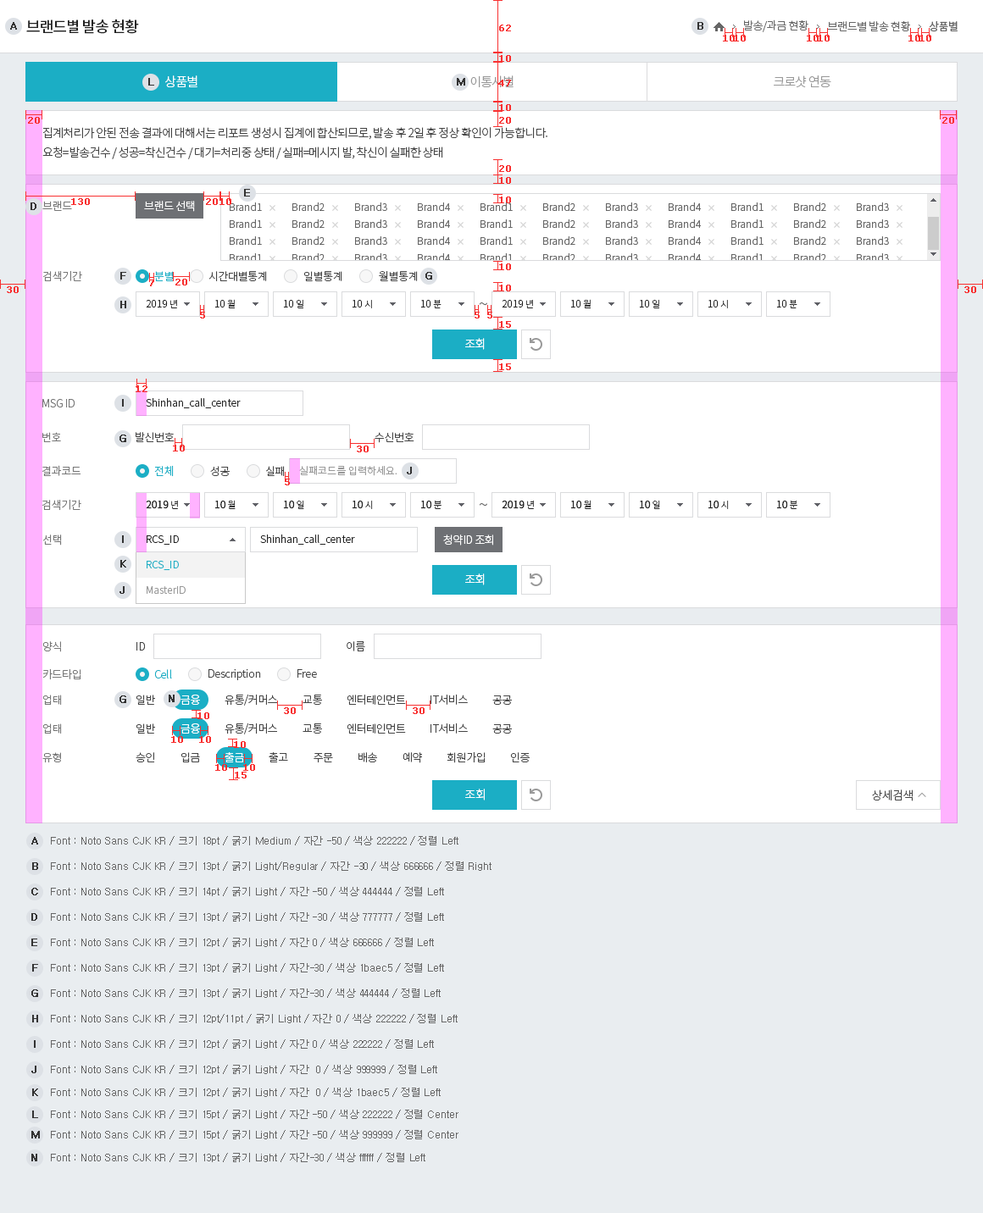
<style>
.page{position:relative;width:983px;height:1213px;background:#ffffff}
.page>*{position:absolute;margin:0}
.t1{font:15.3px "NotoSansCJKkr-Medium";letter-spacing:-0.05em;color:#222222}
.t2{font:9.3px "Verdana";color:#f83030;font-weight:bold}
.t3{font:11px "NotoSansCJKkr-Light";letter-spacing:-0.03em;color:#666666}
.t4{font:11px "NotoSansCJKkr-Regular";letter-spacing:-0.03em;color:#666666}
.t5{font:12.7px "NotoSansCJKkr-Light";letter-spacing:-0.05em;color:#ffffff}
.t6{font:12.7px "NotoSansCJKkr-Light";letter-spacing:-0.05em;color:#999999}
.t7{font:11.9px/19.5px "NotoSansCJKkr-Light";letter-spacing:-0.05em;color:#444444}
.t8{font:11px "NotoSansCJKkr-Light";letter-spacing:-0.03em;color:#777777}
.t9{font:11px "NotoSansCJKkr-Light";letter-spacing:-0.03em;color:#ffffff}
.t10{font:10.2px "NotoSansCJKkr-Light";color:#666666}
.t11{font:11px "NotoSansCJKkr-Light";letter-spacing:-0.03em;color:#1baec5}
.t12{font:11px "NotoSansCJKkr-Light";letter-spacing:-0.03em;color:#444444}
.t13{font:10.2px "NotoSansCJKkr-Light";color:#222222}
.t14{font:9.3px "NotoSansCJKkr-Light";letter-spacing:-0.05em;color:#222222}
.t15{font:16.9px "NotoSansCJKkr-Light";letter-spacing:-0.03em;color:#666666}
.t16{font:11.9px "NotoSansCJKkr-Light";letter-spacing:-0.05em;color:#ffffff}
.t17{font:10.2px "NotoSansCJKkr-Light";color:#999999}
.t18{font:10.2px "NotoSansCJKkr-Light";color:#222222;font-weight:bold}
.t19{font:10.2px/25.4px "NotoSansCJKkr-Light";color:#999999}
.t20{font:10.2px/25.4px "NotoSansCJKkr-Light";color:#1baec5}
.t21{font:11.9px "NotoSansCJKkr-Light";letter-spacing:-0.03em;color:#ffffff}
.t22{font:11.9px "NotoSansCJKkr-Light";letter-spacing:-0.03em;color:#444444}
.t23{font:10.2px "Dotum";color:#323232;font-weight:bold}
.t24{font:10.2px "Dotum";color:#666666}
.t25{font:10.2px "Dotum";color:#323232;text-transform:uppercase;font-weight:bold}
</style>
<div class="page">
<p class="t1" style="left:26px;top:19px;width:113px;height:15px">브랜드별 발송 현황</p>
<p class="t2" style="left:499px;top:25px;width:12px;height:6px">62</p>
<p class="t3" style="left:744px;top:19px;width:64px;height:13px">발송/과금 현황</p>
<p class="t3" style="left:827px;top:20px;width:83px;height:11px">브랜드별 발송 현황</p>
<p class="t4" style="left:929px;top:21px;width:28px;height:11px">상품별</p>
<p class="t2" style="left:499px;top:55px;width:12px;height:7px">10</p>
<p class="t5" style="left:165px;top:75px;width:32px;height:12px">상품별</p>
<p class="t6" style="left:470px;top:75px;width:43px;height:12px">이통사별</p>
<p class="t6" style="left:774px;top:75px;width:57px;height:12px">크로샷 연동</p>
<p class="t2" style="left:498px;top:80px;width:13px;height:6px">47</p>
<p class="t2" style="left:499px;top:104px;width:12px;height:7px">10</p>
<p class="t2" style="left:28px;top:117px;width:12px;height:7px">20</p>
<p class="t2" style="left:499px;top:117px;width:12px;height:7px">20</p>
<p class="t2" style="left:942px;top:117px;width:12px;height:7px">20</p>
<p class="t7" style="left:42px;top:127px;width:505px;height:32px">집계처리가 안된 전송 결과에 대해서는 리포트 생성시 집계에 합산되므로, 발송 후 2일 후 정상 확인이 가능합니다.<br>요청=발송건수 / 성공=착신건수 / 대기=처리중 상태 / 실패=메시지 발, 착신이 실패한 상태</p>
<p class="t2" style="left:499px;top:165px;width:12px;height:7px">20</p>
<p class="t2" style="left:499px;top:177px;width:12px;height:7px">10</p>
<p class="t8" style="left:42px;top:201px;width:30px;height:10px">브랜드</p>
<p class="t2" style="left:71px;top:198px;width:19px;height:7px">130</p>
<p class="t9" style="left:144px;top:201px;width:51px;height:11px">브랜드 선택</p>
<p class="t2" style="left:206px;top:198px;width:12px;height:7px">20</p>
<p class="t2" style="left:219px;top:198px;width:12px;height:7px">10</p>
<p class="t10" style="left:230px;top:202px;width:32px;height:9px">Brand1</p>
<p class="t10" style="left:292px;top:202px;width:33px;height:9px">Brand2</p>
<p class="t10" style="left:355px;top:202px;width:32px;height:9px">Brand3</p>
<p class="t10" style="left:418px;top:202px;width:32px;height:9px">Brand4</p>
<p class="t8" style="left:43px;top:270px;width:39px;height:12px">검색기간</p>
<p class="t2" style="left:149px;top:280px;width:5px;height:6px">7</p>
<p class="t11" style="left:154px;top:271px;width:20px;height:10px">분별</p>
<p class="t2" style="left:175px;top:279px;width:12px;height:7px">20</p>
<p class="t12" style="left:208px;top:271px;width:59px;height:10px">시간대별통계</p>
<p class="t12" style="left:303px;top:271px;width:39px;height:10px">일별통계</p>
<p class="t12" style="left:379px;top:271px;width:39px;height:10px">월별통계</p>
<p class="t2" style="left:7px;top:286px;width:12px;height:7px">30</p>
<p class="t2" style="left:964px;top:286px;width:12px;height:7px">30</p>
<p class="t13" style="left:146px;top:299px;width:31px;height:9px">2019 <span class="t14">년</span></p>
<p class="t13" style="left:214px;top:299px;width:21px;height:9px">10 <span class="t14">월</span></p>
<p class="t13" style="left:283px;top:299px;width:20px;height:9px">10 <span class="t14">일</span></p>
<p class="t13" style="left:352px;top:300px;width:20px;height:8px">10 <span class="t14">시</span></p>
<p class="t13" style="left:420px;top:299px;width:21px;height:9px">10 <span class="t14">분</span></p>
<p class="t15" style="left:479px;top:302px;width:8px;height:4px">~</p>
<p class="t2" style="left:200px;top:312px;width:5px;height:7px">5</p>
<p class="t2" style="left:474px;top:312px;width:6px;height:7px">5</p>
<p class="t2" style="left:487px;top:312px;width:5px;height:7px">5</p>
<p class="t2" style="left:499px;top:321px;width:12px;height:7px">15</p>
<p class="t16" style="left:465px;top:338px;width:20px;height:12px">조회</p>
<p class="t2" style="left:499px;top:363px;width:12px;height:7px">15</p>
<p class="t2" style="left:136px;top:386px;width:11px;height:6px">12</p>
<p class="t8" style="left:42px;top:399px;width:33px;height:9px">MSG ID</p>
<p class="t13" style="left:146px;top:398px;width:95px;height:10px">Shinhan_call_center</p>
<p class="t8" style="left:42px;top:432px;width:19px;height:10px">번호</p>
<p class="t12" style="left:136px;top:432px;width:39px;height:10px">발신번호</p>
<p class="t12" style="left:374px;top:432px;width:40px;height:11px">수신번호</p>
<p class="t2" style="left:173px;top:445px;width:12px;height:7px">10</p>
<p class="t2" style="left:357px;top:446px;width:12px;height:6px">30</p>
<p class="t8" style="left:42px;top:465px;width:39px;height:11px">결과코드</p>
<p class="t11" style="left:154px;top:465px;width:20px;height:12px">전체</p>
<p class="t12" style="left:210px;top:466px;width:20px;height:10px">성공</p>
<p class="t12" style="left:266px;top:466px;width:19px;height:10px">실패</p>
<p class="t17" style="left:299px;top:465px;width:98px;height:11px">실패코드를 입력하세요.</p>
<p class="t2" style="left:285px;top:479px;width:5px;height:6px">5</p>
<p class="t8" style="left:42px;top:499px;width:39px;height:12px">검색기간</p>
<p class="t18" style="left:146px;top:500px;width:32px;height:9px">2019 <span class="t14">년</span></p>
<p class="t18" style="left:214px;top:500px;width:22px;height:9px">10 <span class="t14">월</span></p>
<p class="t18" style="left:283px;top:500px;width:21px;height:9px">10 <span class="t14">일</span></p>
<p class="t18" style="left:352px;top:501px;width:21px;height:8px">10 <span class="t14">시</span></p>
<p class="t18" style="left:420px;top:500px;width:21px;height:9px">10 <span class="t14">분</span></p>
<p class="t15" style="left:479px;top:503px;width:8px;height:4px">~</p>
<p class="t8" style="left:43px;top:535px;width:19px;height:11px">선택</p>
<p class="t13" style="left:147px;top:535px;width:32px;height:10px">RCS_ID</p>
<p class="t13" style="left:147px;top:535px;width:32px;height:10px">RCS_ID</p>
<p class="t13" style="left:260px;top:535px;width:95px;height:10px">Shinhan_call_center</p>
<p class="t9" style="left:443px;top:535px;width:50px;height:11px">청약ID 조회</p>
<p class="t19" style="left:147px;top:561px;width:39px;height:33px"><span class="t20">RCS_ID<br></span>MasterID</p>
<p class="t16" style="left:465px;top:574px;width:20px;height:11px">조회</p>
<p class="t8" style="left:42px;top:641px;width:19px;height:11px">양식</p>
<p class="t12" style="left:347px;top:641px;width:18px;height:11px">이름</p>
<p class="t12" style="left:136px;top:642px;width:10px;height:9px">ID</p>
<p class="t8" style="left:43px;top:668px;width:38px;height:12px">카드타입</p>
<p class="t11" style="left:154px;top:669px;width:18px;height:10px">Cell</p>
<p class="t12" style="left:208px;top:669px;width:53px;height:11px">Description</p>
<p class="t12" style="left:297px;top:669px;width:20px;height:9px">Free</p>
<p class="t8" style="left:42px;top:695px;width:20px;height:10px">업태</p>
<p class="t12" style="left:136px;top:695px;width:19px;height:10px">일반</p>
<p class="t9" style="left:180px;top:695px;width:20px;height:10px">금융</p>
<p class="t12" style="left:225px;top:694px;width:52px;height:12px">유통/커머스</p>
<p class="t12" style="left:302px;top:695px;width:20px;height:10px">교통</p>
<p class="t12" style="left:347px;top:695px;width:59px;height:10px">엔터테인먼트</p>
<p class="t12" style="left:430px;top:694px;width:38px;height:11px">IT서비스</p>
<p class="t12" style="left:492px;top:696px;width:20px;height:9px">공공</p>
<p class="t2" style="left:197px;top:713px;width:12px;height:6px">10</p>
<p class="t2" style="left:284px;top:707px;width:12px;height:7px">30</p>
<p class="t2" style="left:413px;top:707px;width:11px;height:7px">30</p>
<p class="t8" style="left:42px;top:724px;width:20px;height:10px">업태</p>
<p class="t12" style="left:136px;top:724px;width:19px;height:10px">일반</p>
<p class="t9" style="left:180px;top:724px;width:20px;height:10px">금융</p>
<p class="t12" style="left:225px;top:723px;width:52px;height:12px">유통/커머스</p>
<p class="t12" style="left:302px;top:724px;width:20px;height:10px">교통</p>
<p class="t12" style="left:347px;top:724px;width:59px;height:10px">엔터테인먼트</p>
<p class="t12" style="left:430px;top:723px;width:38px;height:11px">IT서비스</p>
<p class="t12" style="left:492px;top:724px;width:20px;height:10px">공공</p>
<p class="t8" style="left:42px;top:752px;width:19px;height:11px">유형</p>
<p class="t12" style="left:136px;top:752px;width:19px;height:11px">승인</p>
<p class="t12" style="left:180px;top:752px;width:20px;height:11px">입금</p>
<p class="t9" style="left:225px;top:752px;width:19px;height:11px">출금</p>
<p class="t12" style="left:269px;top:752px;width:19px;height:11px">출고</p>
<p class="t12" style="left:313px;top:753px;width:20px;height:10px">주문</p>
<p class="t12" style="left:358px;top:752px;width:19px;height:11px">배송</p>
<p class="t12" style="left:402px;top:752px;width:20px;height:11px">예약</p>
<p class="t12" style="left:447px;top:752px;width:38px;height:11px">회원가입</p>
<p class="t12" style="left:510px;top:752px;width:20px;height:11px">인증</p>
<p class="t2" style="left:235px;top:772px;width:12px;height:7px">15</p>
<p class="t21" style="left:465px;top:789px;width:20px;height:12px">조회</p>
<p class="t22" style="left:872px;top:790px;width:40px;height:12px">상세검색</p>
<p class="t23" style="left:31px;top:837px;width:7px;height:8px">A</p>
<p class="t24" style="left:51px;top:836px;width:407px;height:10px">Font : Noto Sans CJK KR / 크기 18pt / 굵기 Medium / 자간 -50 / 색상 222222 / 정렬 Left</p>
<p class="t23" style="left:32px;top:863px;width:6px;height:7px">B</p>
<p class="t24" style="left:51px;top:862px;width:440px;height:9px">Font : Noto Sans CJK KR / 크기 13pt / 굵기 Light/Regular / 자간 -30 / 색상 666666 / 정렬 Right</p>
<p class="t25" style="left:31px;top:888px;width:7px;height:8px">c</p>
<p class="t24" style="left:51px;top:887px;width:393px;height:9px">Font : Noto Sans CJK KR / 크기 14pt / 굵기 Light / 자간 -50 / 색상 444444 / 정렬 Left</p>
<p class="t25" style="left:31px;top:913px;width:6px;height:8px">d</p>
<p class="t24" style="left:51px;top:912px;width:393px;height:10px">Font : Noto Sans CJK KR / 크기 13pt / 굵기 Light / 자간 -30 / 색상 777777 / 정렬 Left</p>
<p class="t25" style="left:31px;top:939px;width:6px;height:7px">e</p>
<p class="t24" style="left:51px;top:938px;width:383px;height:9px">Font : Noto Sans CJK KR / 크기 12pt / 굵기 Light / 자간 0 / 색상 666666 / 정렬 Left</p>
<p class="t25" style="left:32px;top:964px;width:6px;height:8px">f</p>
<p class="t24" style="left:51px;top:963px;width:393px;height:10px">Font : Noto Sans CJK KR / 크기 13pt / 굵기 Light / 자간-30 / 색상 1baec5 / 정렬 Left</p>
<p class="t25" style="left:31px;top:990px;width:7px;height:7px">g</p>
<p class="t24" style="left:51px;top:989px;width:390px;height:9px">Font : Noto Sans CJK KR / 크기 13pt / 굵기 Light / 자간-30 / 색상 444444 / 정렬 Left</p>
<p class="t25" style="left:32px;top:1015px;width:6px;height:8px">h</p>
<p class="t24" style="left:51px;top:1014px;width:407px;height:9px">Font : Noto Sans CJK KR / 크기 12pt/11pt / 굵기 Light / 자간 0 / 색상 222222 / 정렬 Left</p>
<p class="t24" style="left:51px;top:1040px;width:383px;height:9px">Font : Noto Sans CJK KR / 크기 12pt / 굵기 Light / 자간 0 / 색상 222222 / 정렬 Left</p>
<p class="t23" style="left:31px;top:1066px;width:5px;height:7px">J</p>
<p class="t24" style="left:51px;top:1065px;width:386px;height:9px">Font : Noto Sans CJK KR / 크기 12pt / 굵기 Light / 자간  0 / 색상 999999 / 정렬 Left</p>
<p class="t23" style="left:32px;top:1089px;width:6px;height:7px">K</p>
<p class="t24" style="left:51px;top:1088px;width:390px;height:9px">Font : Noto Sans CJK KR / 크기 12pt / 굵기 Light / 자간  0 / 색상 1baec5 / 정렬 Left</p>
<p class="t24" style="left:51px;top:1110px;width:407px;height:9px">Font : Noto Sans CJK KR / 크기 15pt / 굵기 Light / 자간 -50 / 색상 222222 / 정렬 Center</p>
<p class="t23" style="left:32px;top:1111px;width:6px;height:7px">L</p>
<p class="t23" style="left:31px;top:1131px;width:9px;height:8px">M</p>
<p class="t24" style="left:51px;top:1130px;width:407px;height:10px">Font : Noto Sans CJK KR / 크기 15pt / 굵기 Light / 자간 -50 / 색상 999999 / 정렬 Center</p>
<p class="t23" style="left:31px;top:1154px;width:6px;height:8px">N</p>
<p class="t24" style="left:51px;top:1153px;width:374px;height:9px">Font : Noto Sans CJK KR / 크기 13pt / 굵기 Light / 자간-30 / 색상 ffffff / 정렬 Left</p>
</div>
